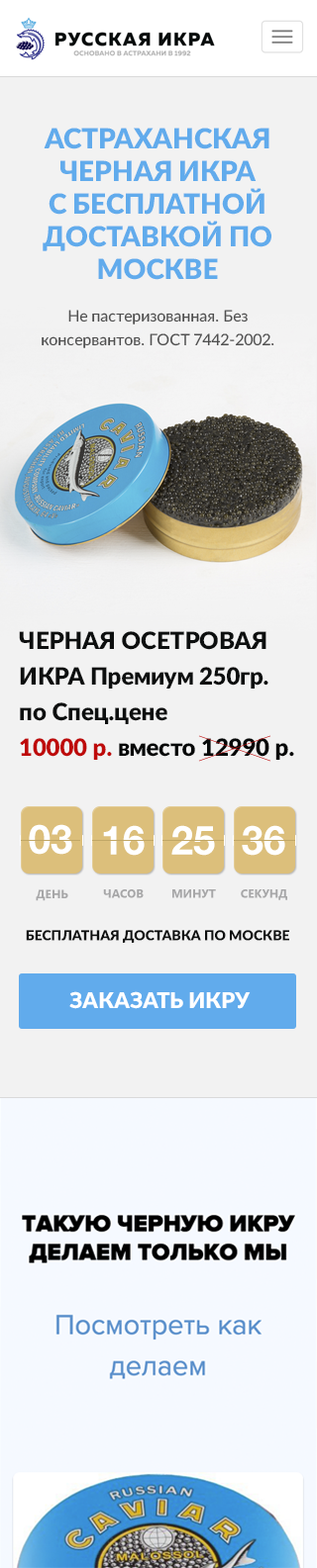
<style>
.page{position:relative;width:317px;height:1568px;background:#f2f2f2}
.page>*{position:absolute;margin:0}
.t1{font:27.7px/32.6px "Lato-Black";color:#61abec;text-transform:uppercase}
.t2{font:15.8px/23.7px "Lato-Medium";color:#505050}
.t3{font:23.7px/35.6px "Lato-Black";letter-spacing:-0.01em;color:#0d0f0f}
.t4{font:23.7px/35.6px "Lato-Black";letter-spacing:-0.01em;color:#be0a0a}
.t5{font:23.7px/35.6px "Lato-Black";letter-spacing:-0.01em;color:#060808}
.t6{font:40.4px "HelveticaNeue-Bold";color:#ffffff;text-transform:uppercase}
.t7{font:11.9px "SegoeUI-Bold";color:#a7a7a8;text-transform:uppercase}
.t8{font:13.8px "Lato-Black";color:#0d0f0f;text-transform:uppercase}
.t9{font:21.8px "Lato-Black";color:#ffffff;text-transform:uppercase}
</style>
<div class="page">
<p class="t1" style="left:43px;top:128px;width:228px;height:152px;text-align:center">АСТРАХАНСКАЯ ЧЕРНАЯ ИКРА<br>С БЕСПЛАТНОЙ ДОСТАВКОЙ ПО МОСКВЕ</p>
<p class="t2" style="left:42px;top:310px;width:232px;height:38px;text-align:center">Не пастеризованная. Без консервантов. ГОСТ 7442-2002.</p>
<p class="t3" style="left:19px;top:631px;width:275px;height:129px">ЧЕРНАЯ ОСЕТРОВАЯ ИКРА Премиум 250гр.<br>по Спец.цене <br><span class="t4">10000 р. </span><span class="t5">вместо 12990 р.</span></p>
<p class="t6" style="left:29px;top:824px;width:43px;height:31px">03</p>
<p class="t6" style="left:103px;top:825px;width:41px;height:31px">16</p>
<p class="t6" style="left:171px;top:825px;width:44px;height:31px">25</p>
<p class="t6" style="left:241px;top:825px;width:44px;height:31px">36</p>
<p class="t7" style="left:36px;top:889px;width:32px;height:12px">день</p>
<p class="t7" style="left:103px;top:889px;width:40px;height:9px">Часов</p>
<p class="t7" style="left:172px;top:889px;width:44px;height:9px">минут</p>
<p class="t7" style="left:240px;top:889px;width:47px;height:11px">Секунд</p>
<p class="t8" style="left:26px;top:930px;width:263px;height:13px">Бесплатная доставка по Москве</p>
<p class="t9" style="left:69px;top:991px;width:181px;height:18px">Заказать икру</p>
</div>
